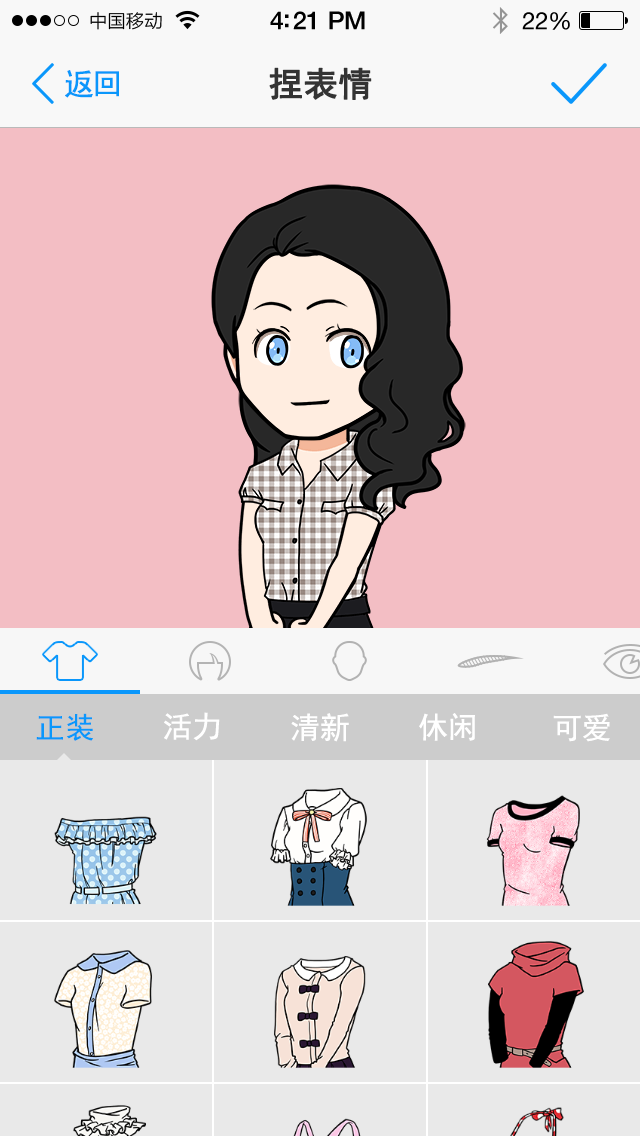
<style>
.page{position:relative;width:640px;height:1136px;background:#f3bec4}
.page>*{position:absolute;margin:0}
.t1{font:30px "SimHei";letter-spacing:-0.075em;color:#0a97fb;font-weight:bold}
.t2{font:34px "SimHei";letter-spacing:-0.01em;color:#333333;font-weight:bold}
.t3{font:30px "SimHei";letter-spacing:-0.01em;color:#0a97fb}
.t4{font:30px "SimHei";letter-spacing:-0.01em;color:#ffffff}
</style>
<div class="page">
<p class="t1" style="left:65px;top:70px;width:54px;height:28px">返回</p>
<p class="t2" style="left:269px;top:67px;width:103px;height:33px">捏表情</p>
<p class="t3" style="left:36px;top:713px;width:57px;height:28px">正装</p>
<p class="t4" style="left:164px;top:712px;width:56px;height:29px">活力</p>
<p class="t4" style="left:291px;top:713px;width:58px;height:29px">清新</p>
<p class="t4" style="left:419px;top:713px;width:56px;height:28px">休闲</p>
<p class="t4" style="left:553px;top:713px;width:57px;height:29px">可爱</p>
</div>
